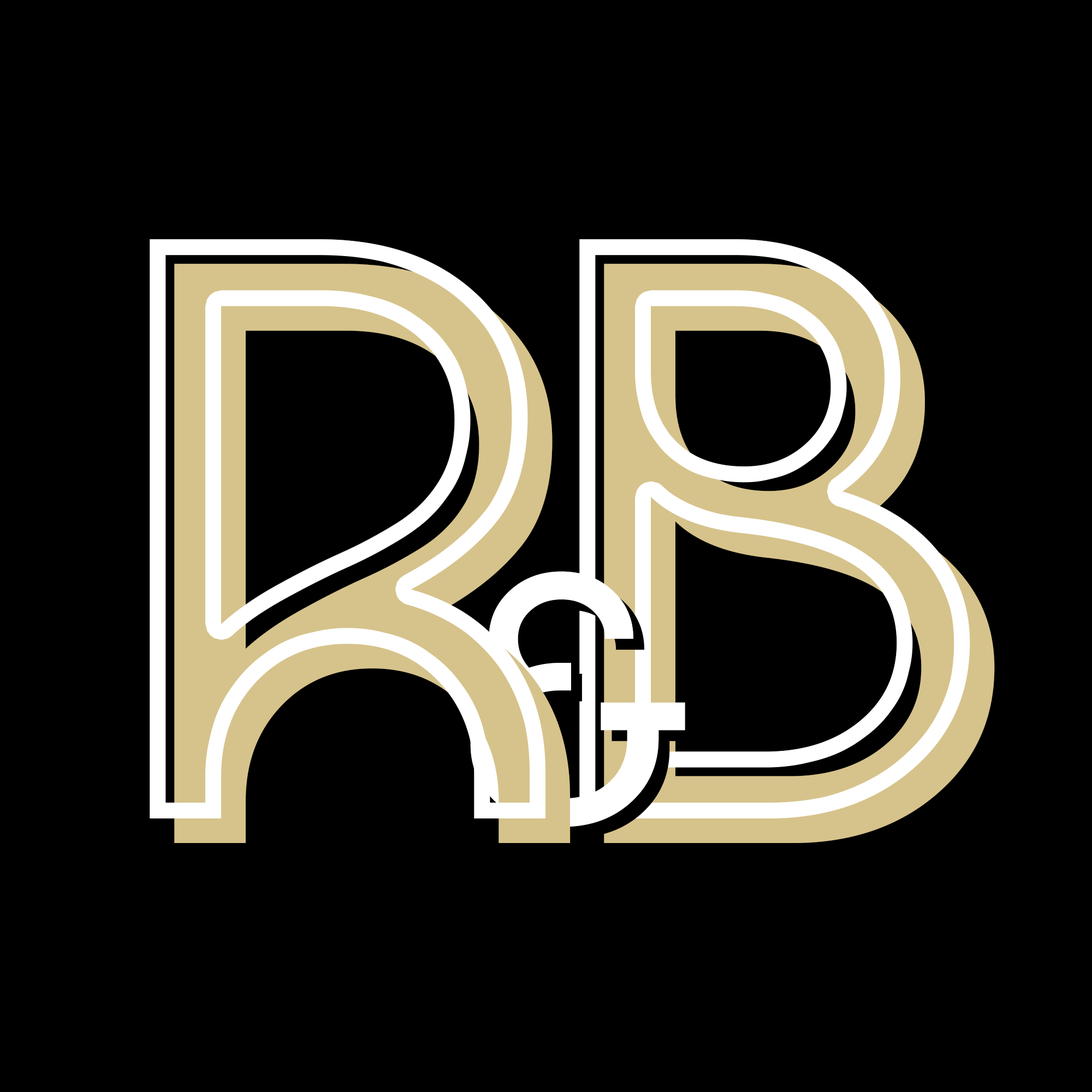
<style>
.page{position:relative;width:1092px;height:1092px;background:#000000}
.page>*{position:absolute;margin:0}
.t1{font:891.3px "Paris2024-Regular"}
.t2{font:891.3px "Paris2024-Regular";color:#d6c38b}
.t3{font:382.2px "Paris2024-Regular";color:#ffffff}
</style>
<div class="page">
<p class="t1" style="left:150px;top:239px;width:396px;height:579px">R</p>
<p class="t1" style="left:579px;top:239px;width:391px;height:579px">B</p>
<p class="t2" style="left:174px;top:264px;width:397px;height:579px">R</p>
<p class="t2" style="left:604px;top:264px;width:391px;height:579px">B</p>
<p class="t3" style="left:470px;top:571px;width:215px;height:256px">&amp;</p>
</div>
